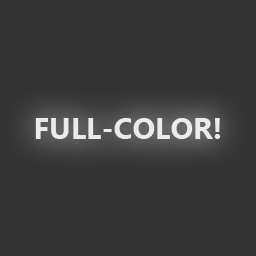
<style>
.page{position:relative;width:256px;height:256px;background:#333333}
.page>*{position:absolute;margin:0}
.t1{font:30px "MicrosoftTaiLe-Bold";color:#ebebeb}
</style>
<div class="page">
<p class="t1" style="left:35px;top:118px;width:186px;height:21px">FULL-COLOR!</p>
</div>
